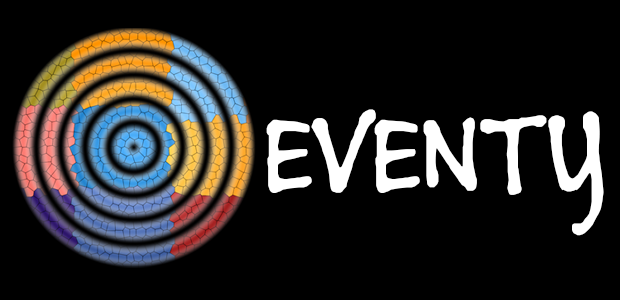
<style>
.page{position:relative;width:620px;height:300px;background:#000000}
.page>*{position:absolute;margin:0}
.t1{font:120px "BuxtonSketch";color:#ffffff}
</style>
<div class="page">
<p class="t1" style="left:266px;top:109px;width:338px;height:127px">EVENTY</p>
</div>
